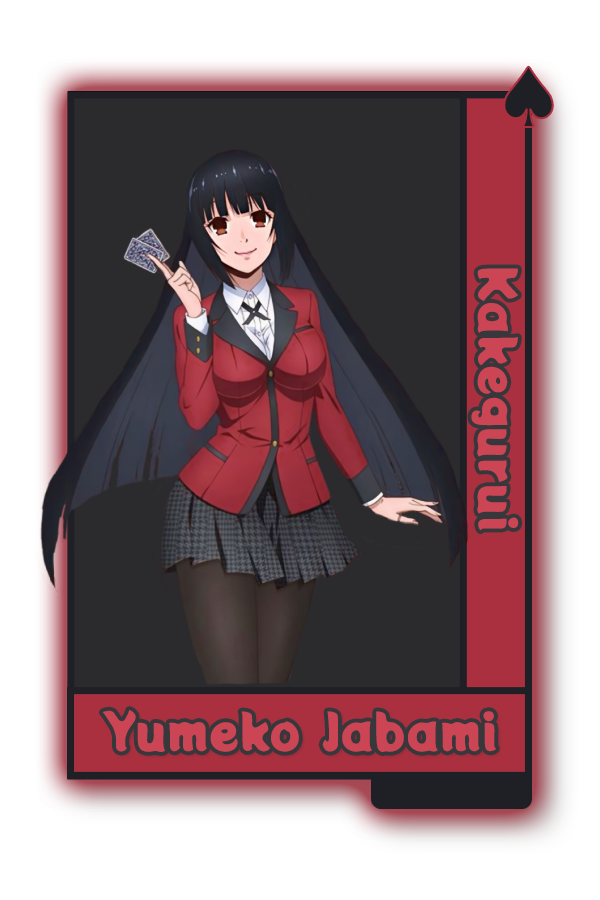
<style>
.page{position:relative;width:600px;height:900px;background:#2b2a2d}
.page>*{position:absolute;margin:0}
.t1{font:80px "DejaVuSans";color:#1e2026}
.t2{font:50px "PottaOne-Regular";color:#cb4554}
</style>
<div class="page">
<p class="t1" style="left:505px;top:67px;width:47px;height:59px">♠️</p>
<p class="t2" style="left:471px;top:268px;width:48px;height:263px;rotate:90deg">Kakegurui</p>
<p class="t2" style="left:102px;top:709px;width:395px;height:44px">Yumeko Jabami</p>
</div>
